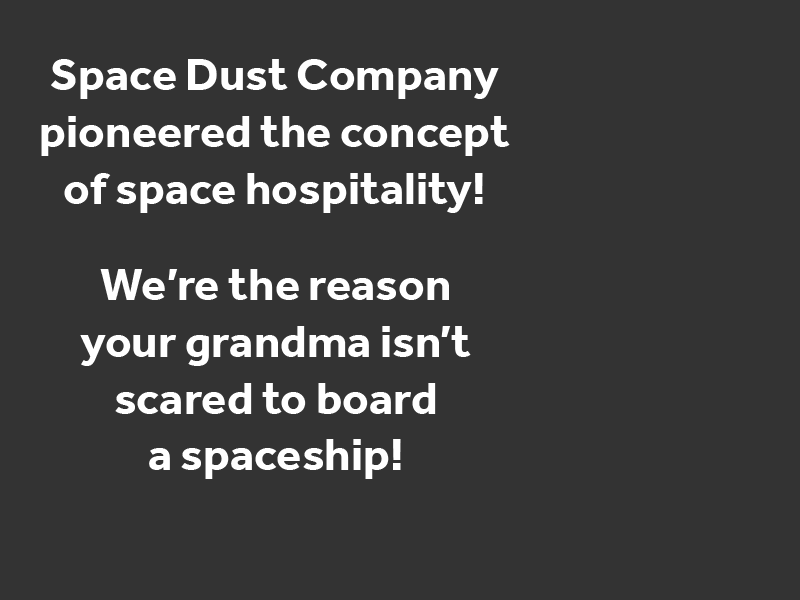
<style>
.page{position:relative;width:800px;height:600px;background:#333333}
.page>*{position:absolute;margin:0}
.t1{font:47.1px "Effra-Bold";color:#ffffff}
</style>
<div class="page">
<p class="t1" style="left:41px;top:59px;width:469px;height:154px;text-align:center">Space Dust Company<br>pioneered the concept<br>of space hospitality!</p>
<p class="t1" style="left:80px;top:269px;width:391px;height:210px;text-align:center">We’re the reason<br>your grandma isn’t<br>scared to board<br>a spaceship!</p>
</div>
